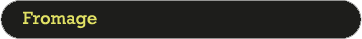
<style>
.page{position:relative;width:362px;height:39px;background:#1d1d1b}
.page>*{position:absolute;margin:0}
.t1{font:18px "Rockwell";color:#e1e164}
</style>
<div class="page">
<p class="t1" style="left:23px;top:11px;width:74px;height:18px">Fromage</p>
</div>
